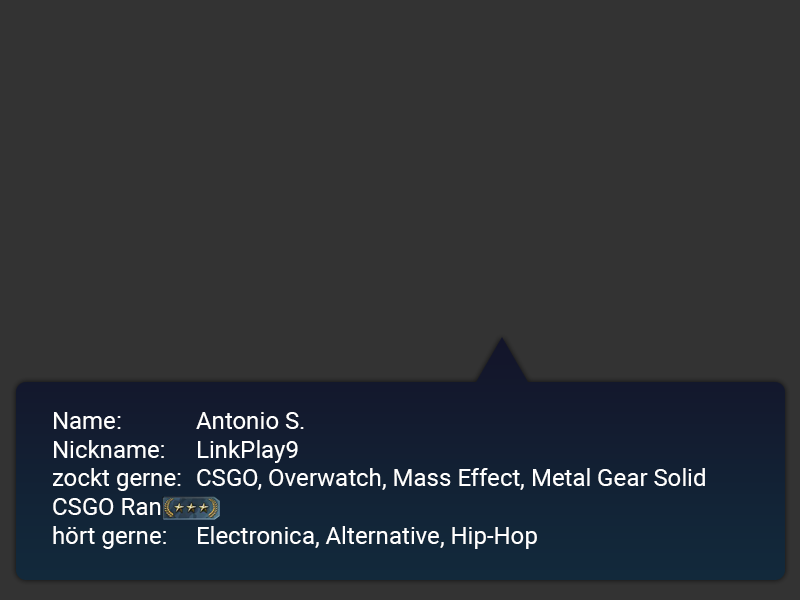
<style>
.page{position:relative;width:800px;height:600px;background:#333333}
.page>*{position:absolute;margin:0}
.t1{font:24px "Roboto-Regular";color:#ffffff}
</style>
<div class="page">
<p class="t1" style="left:53px;top:412px;width:652px;height:137px">Name:   Antonio S.<br> Nickname: LinkPlay9<br> zockt gerne: CSGO, Overwatch, Mass Effect, Metal Gear Solid<br> CSGO Rank: <br> hört gerne: Electronica, Alternative, Hip-Hop</p>
</div>
